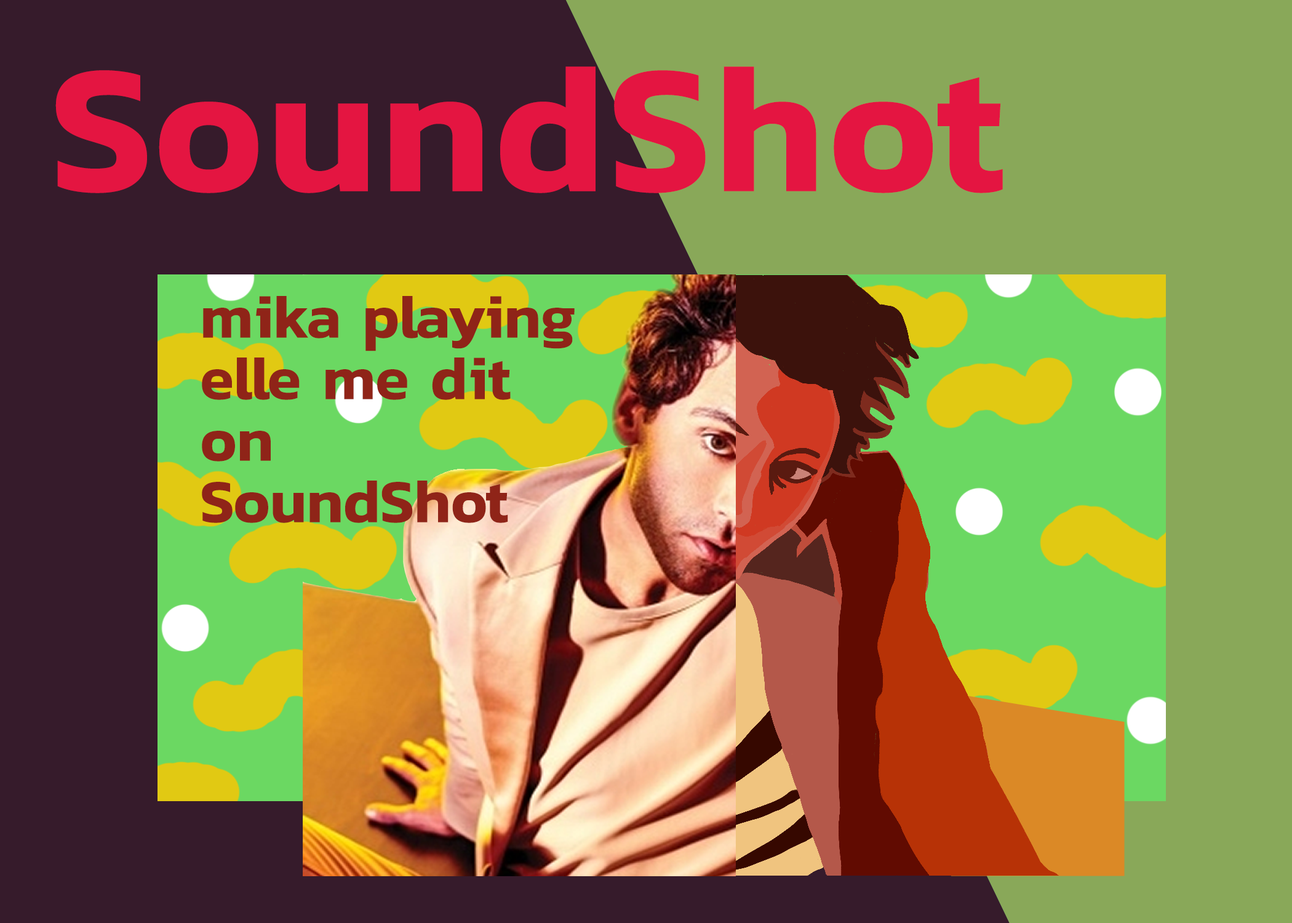
<style>
.page{position:relative;width:1292px;height:923px;background:#361b2b}
.page>*{position:absolute;margin:0}
.t1{font:184.6px "Kanit-SemiBold";letter-spacing:0.02em;color:#e41541}
.t2{font:61.5px/61.5px "Kanit-SemiBold";color:#8f2418}
</style>
<div class="page">
<p class="t1" style="left:55px;top:66px;width:948px;height:127px">SoundShot</p>
<p class="t2" style="left:202px;top:296px;width:373px;height:227px">mika playing<br>elle me dit<br>on<br>SoundShot</p>
</div>
